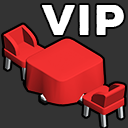
<style>
.page{position:relative;width:128px;height:128px;background:#333333}
.page>*{position:absolute;margin:0}
.t1{font:42px "SVN-NexaRushSansBlack";letter-spacing:0.05em;color:#ffffff;text-transform:uppercase}
</style>
<div class="page">
<p class="t1" style="left:42px;top:5px;width:82px;height:30px">VIP</p>
</div>
